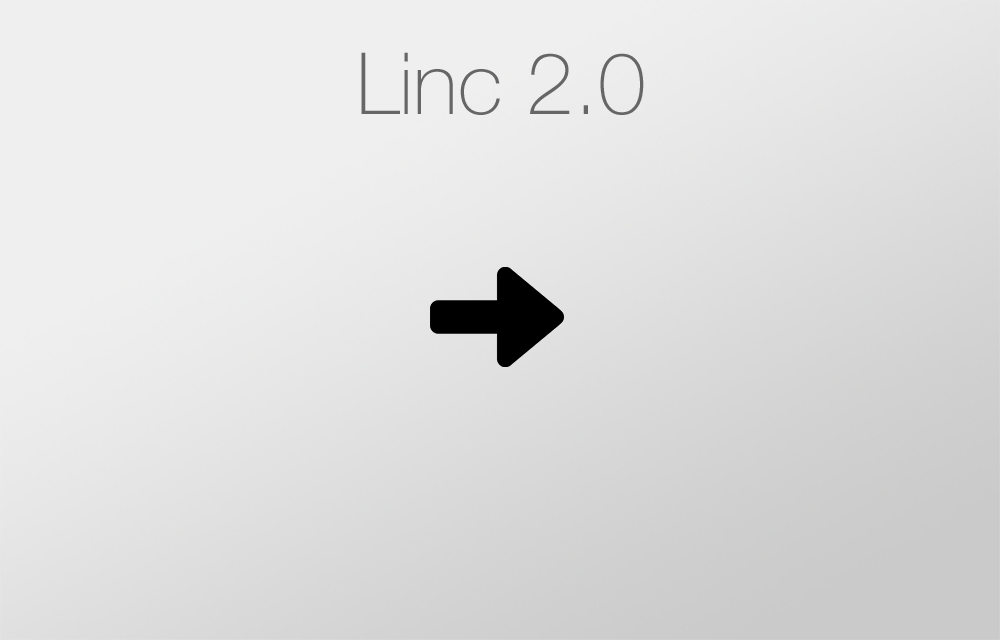
<style>
.page{position:relative;width:1000px;height:640px}
.page>*{position:absolute;margin:0}
.t1{font:85.7px "HelveticaNeue-Thin";color:#666666}
</style>
<div class="page">
<p class="t1" style="left:361px;top:52px;width:283px;height:63px">Linc 2.0</p>
</div>
